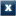
<style>
.page{position:relative;width:16px;height:16px}
.page>*{position:absolute;margin:0}
.t1{font:13px "Candara-Bold";color:#ffffff}
</style>
<div class="page">
<p class="t1" style="left:5px;top:4px;width:7px;height:7px">x</p>
</div>
